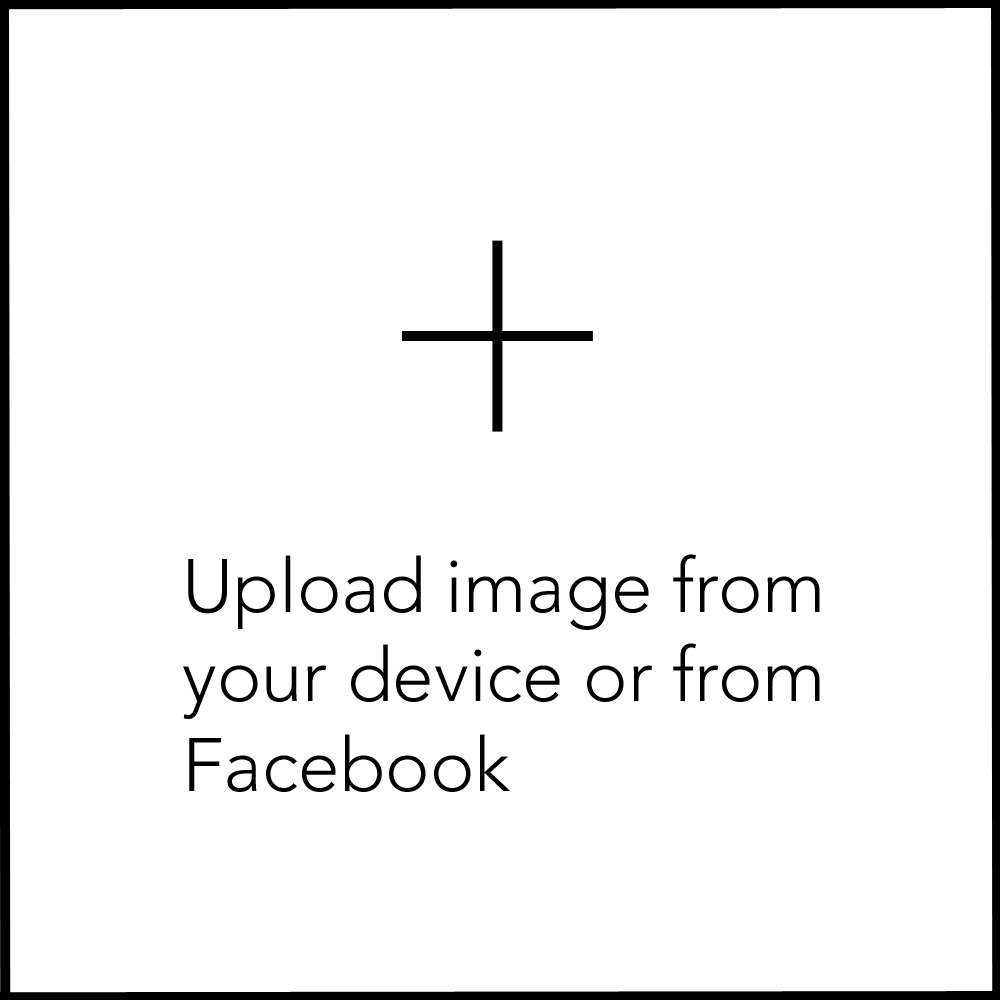
<style>
.page{position:relative;width:1000px;height:1000px;background:#ffffff}
.page>*{position:absolute;margin:0}
.t1{font:74.7px "Avenir-Light";color:#000000}
</style>
<div class="page">
<p class="t1" style="left:183px;top:554px;width:637px;height:238px">Upload image from<br>your device or from <br>Facebook</p>
</div>
